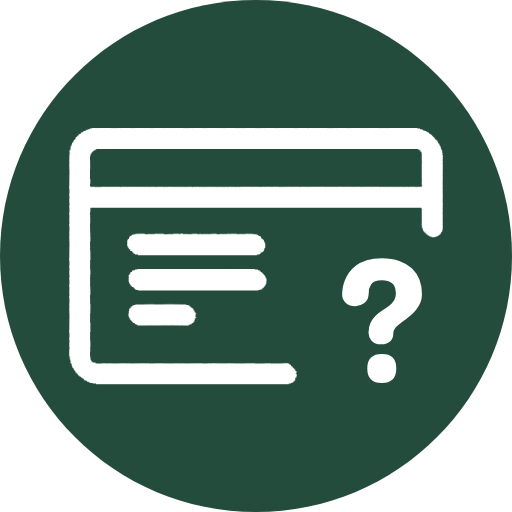
<style>
.page{position:relative;width:512px;height:512px;background:#244c3c}
.page>*{position:absolute;margin:0}
.t1{font:180px "Dangrek-Regular";color:#ffffff}
</style>
<div class="page">
<p class="t1" style="left:342px;top:258px;width:80px;height:125px">?</p>
</div>
